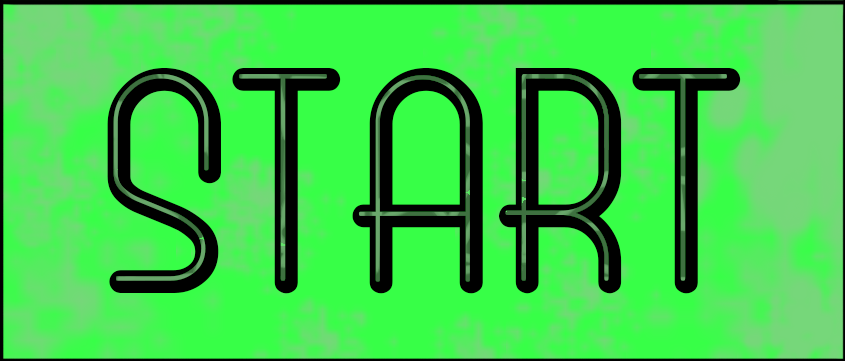
<style>
.page{position:relative;width:845px;height:361px;background:#37ff47}
.page>*{position:absolute;margin:0}
.t1{font:300px "BeautySchoolDropoutII";color:#000000}
</style>
<div class="page">
<p class="t1" style="left:107px;top:68px;width:634px;height:226px">START</p>
</div>
